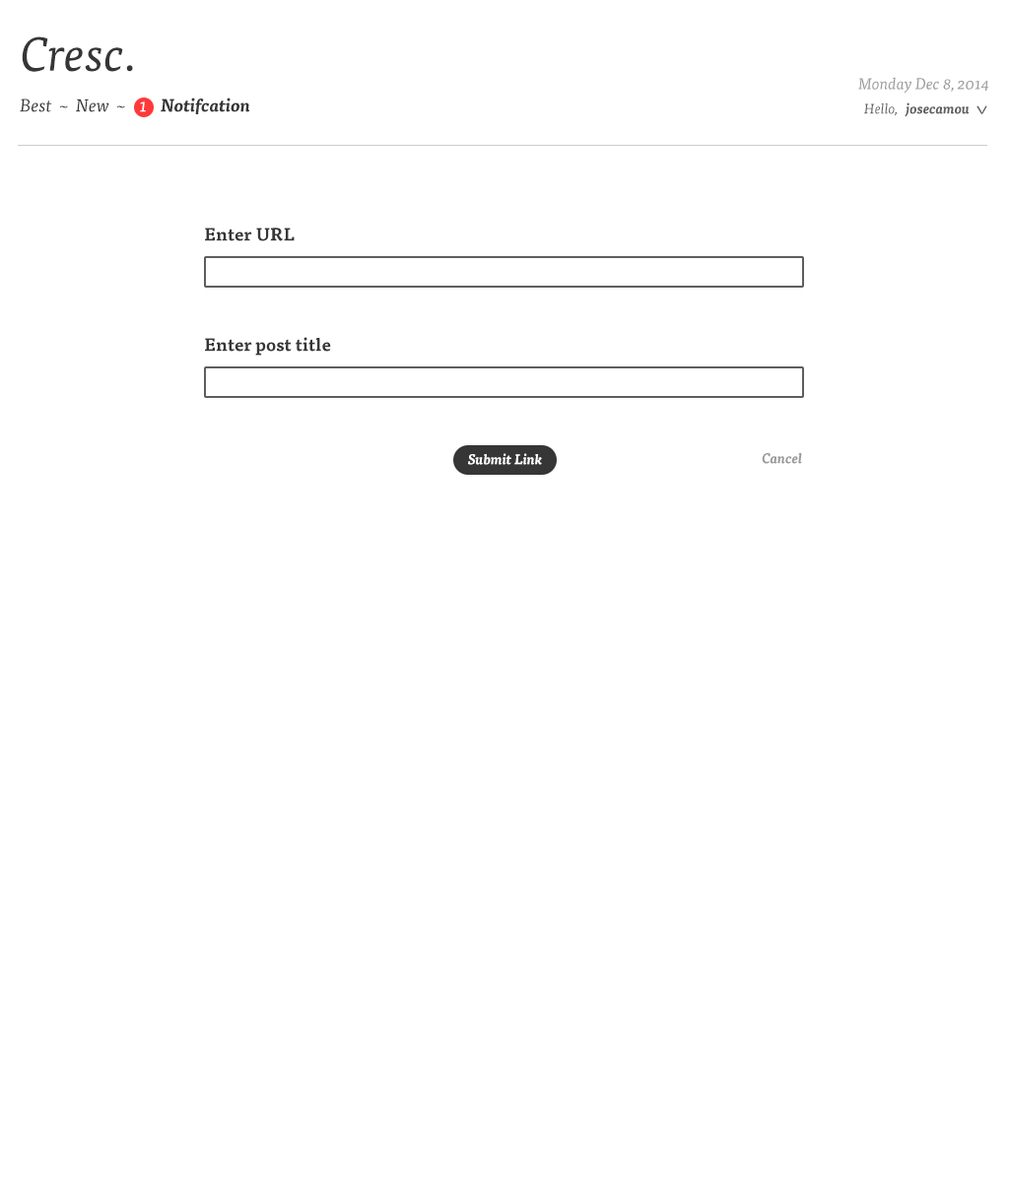
<style>
.page{position:relative;width:1009px;height:1182px;background:#ffffff}
.page>*{position:absolute;margin:0}
.t1{font:47.3px "TisaPro-Ita";color:#363636}
.t2{font:15.8px "TisaPro-Ita";color:#9a9a9a}
.t3{font:17.7px "TisaPro-Ita";color:#363636}
.t4{font:17.7px "TisaPro-Ita";color:#ffffff}
.t5{font:17.7px "TisaPro-BoldIta";color:#363636}
.t6{font:13.8px "TisaPro-BoldIta";color:#5e5e5e}
.t7{font:13.8px "TisaPro-Ita";color:#5e5e5e}
.t8{font:23.6px "TisaPro-Ita";color:#5e5e5e}
.t9{font:17.7px "TisaPro-Bold";color:#363636}
.t10{font:13.8px "TisaPro-BoldIta";color:#ffffff}
.t11{font:13.8px "TisaPro-BoldIta";color:#9a9a9a}
</style>
<div class="page">
<p class="t1" style="left:22px;top:36px;width:111px;height:36px">Cresc.</p>
<p class="t2" style="left:858px;top:77px;width:130px;height:17px">Monday Dec 8, 2014</p>
<p class="t3" style="left:20px;top:98px;width:230px;height:16px">Best  ~  New  ~ <span class="t4">   1    </span><span class="t5">Notifcation</span></p>
<p class="t6" style="left:864px;top:102px;width:105px;height:15px"><span class="t7">Hello,</span>   josecamou</p>
<p class="t8" style="left:976px;top:105px;width:11px;height:9px;rotate:180deg">^</p>
<p class="t9" style="left:205px;top:228px;width:90px;height:13px">Enter URL</p>
<p class="t9" style="left:205px;top:337px;width:126px;height:19px">Enter post title</p>
<p class="t10" style="left:468px;top:453px;width:74px;height:12px">Submit Link</p>
<p class="t11" style="left:761px;top:453px;width:41px;height:11px">Cancel</p>
</div>
